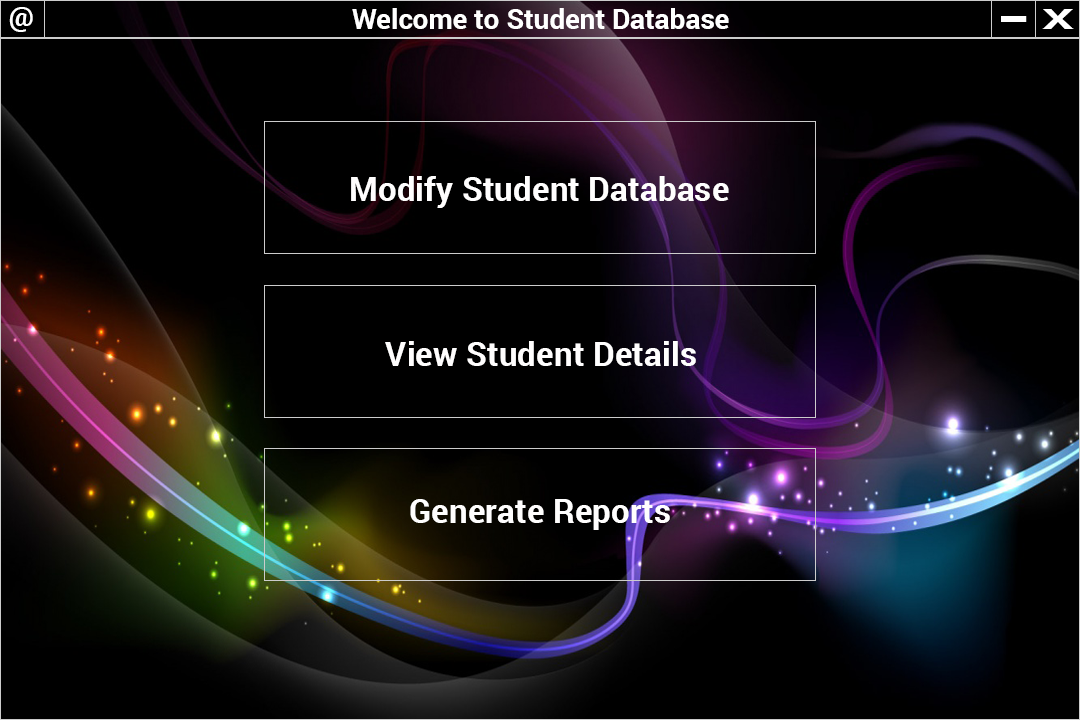
<style>
.page{position:relative;width:1080px;height:720px;background:#000000}
.page>*{position:absolute;margin:0}
.t1{font:27.8px "Roboto-Bold";color:#ffffff}
.t2{font:50px "Roboto-Bold";color:#ffffff;scale:1.81 1}
.t3{font:27.8px "Roboto-Bold";color:#ffffff;scale:1.81 1}
.t4{font:33.3px "Roboto-Bold";color:#fffefe}
.t5{font:12px "Roboto-Bold";color:#fffefe}
</style>
<div class="page">
<p class="t1" style="left:9px;top:7px;width:24px;height:25px">@</p>
<p class="t1" style="left:352px;top:8px;width:377px;height:21px">Welcome to Student Database</p>
<p class="t2" style="left:1001px;top:16px;width:26px;height:6px">-</p>
<p class="t3" style="left:1042px;top:9px;width:32px;height:20px">X</p>
<p class="t4" style="left:351px;top:176px;width:378px;height:32px">Modify Student Database</p>
<p class="t5" style="left:385px;top:341px;width:311px;height:25px;text-align:center">View Student Details</p>
<p class="t5" style="left:410px;top:499px;width:260px;height:31px;text-align:center">Generate Reports</p>
</div>
